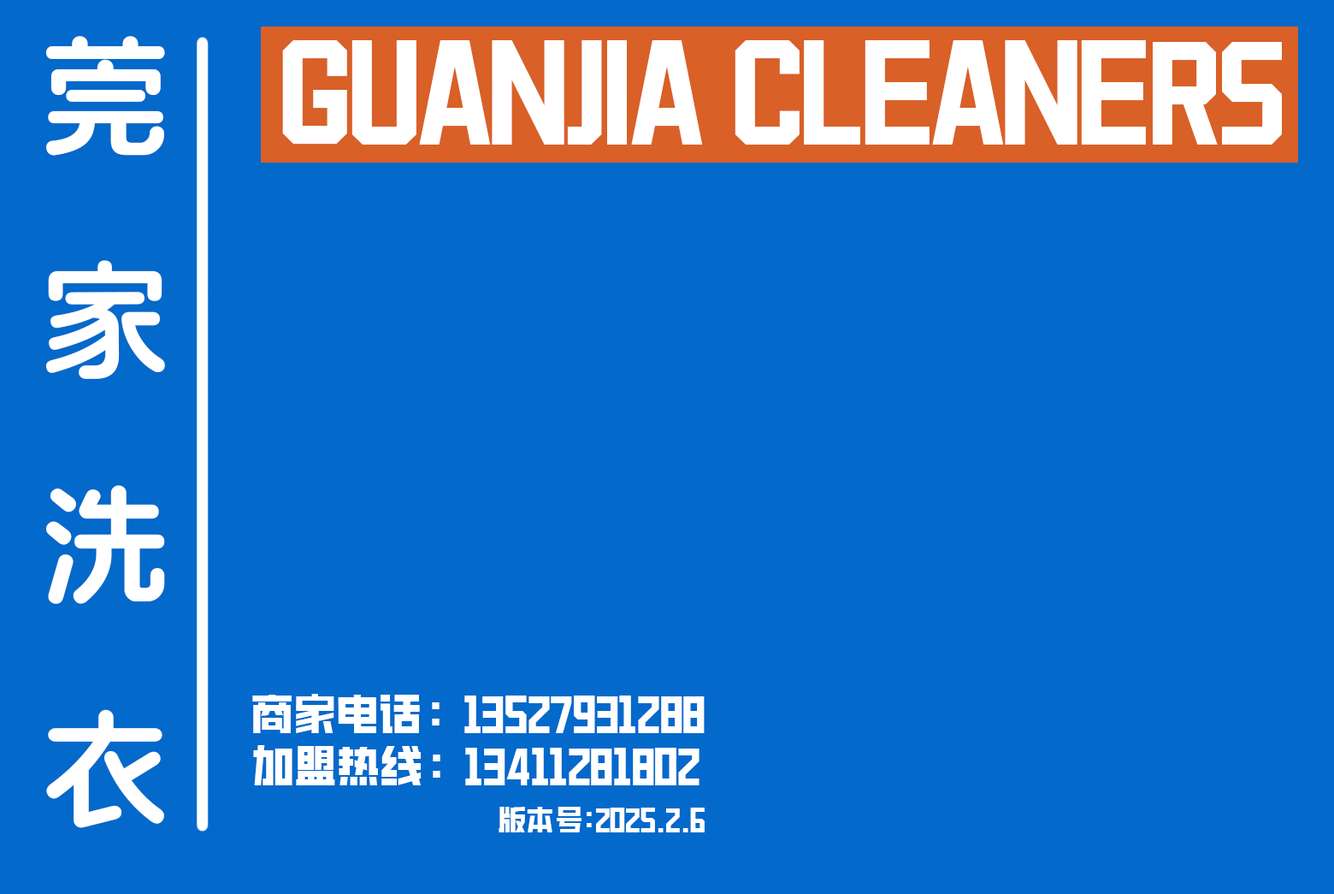
<style>
.page{position:relative;width:1334px;height:894px;background:#0369cb}
.page>*{position:absolute;margin:0}
.t1{font:128.3px "AlibabaHealthFont20CN-85B";color:#ffffff}
.t2{font:118.8px "CKTKingKong";color:#ffffff}
.t3{font:42.8px "CKTKingKong";color:#ffffff}
.t4{font:28.6px "CKTKingKong";color:#ffffff}
</style>
<div class="page">
<p class="t1" style="left:46px;top:36px;width:119px;height:792px;text-align:right">莞<br>家<br>洗<br>衣</p>
<p class="t2" style="left:282px;top:40px;width:1000px;height:105px">GUANJIA CLEANERS</p>
<p class="t3" style="left:252px;top:694px;width:453px;height:39px">商家电话：13527931288</p>
<p class="t3" style="left:253px;top:745px;width:447px;height:40px">加盟热线：13411281802</p>
<p class="t4" style="left:499px;top:807px;width:206px;height:25px">版本号:2025.2.6</p>
</div>
